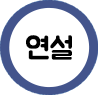
<style>
.page{position:relative;width:98px;height:95px;background:#ffffff}
.page>*{position:absolute;margin:0}
.t1{font:30px "BMJUA";color:#000000}
</style>
<div class="page">
<p class="t1" style="left:26px;top:35px;width:46px;height:25px">연설</p>
</div>
